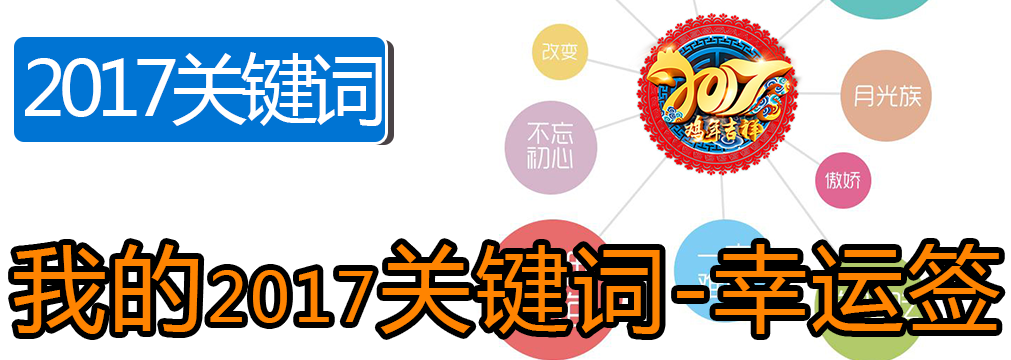
<style>
.page{position:relative;width:1011px;height:360px;background:#ffffff}
.page>*{position:absolute;margin:0}
.t1{font:76.4px "MicrosoftYaHei";letter-spacing:-0.095em;color:#ffffff}
.t2{font:92.8px "MicrosoftYaHei";letter-spacing:0.045em;color:#ff8400}
.t3{font:68px "MicrosoftYaHei";letter-spacing:0.045em;color:#ff8400}
</style>
<div class="page">
<p class="t1" style="left:25px;top:52px;width:357px;height:74px">2017关键词</p>
<p class="t2" style="left:14px;top:244px;width:986px;height:90px">我的<span class="t3">2017</span>关键词-幸运签</p>
</div>
